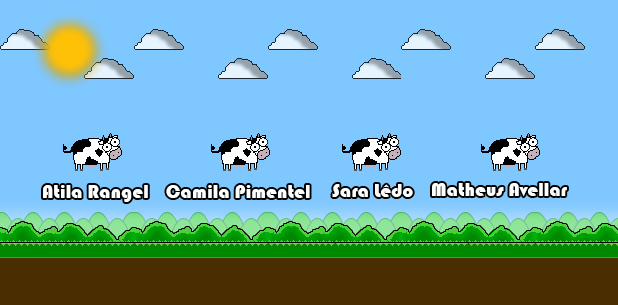
<style>
.page{position:relative;width:618px;height:305px;background:#7fc7ff}
.page>*{position:absolute;margin:0}
.t1{font:19.4px "Bauhaus93";color:#ffffff}
</style>
<div class="page">
<p class="t1" style="left:43px;top:185px;width:105px;height:17px">Atila Rangel</p>
<p class="t1" style="left:166px;top:185px;width:144px;height:13px">Camila Pimentel</p>
<p class="t1" style="left:332px;top:184px;width:81px;height:13px">Sara Lêdo</p>
<p class="t1" style="left:432px;top:183px;width:135px;height:14px">Matheus Avellar</p>
</div>
